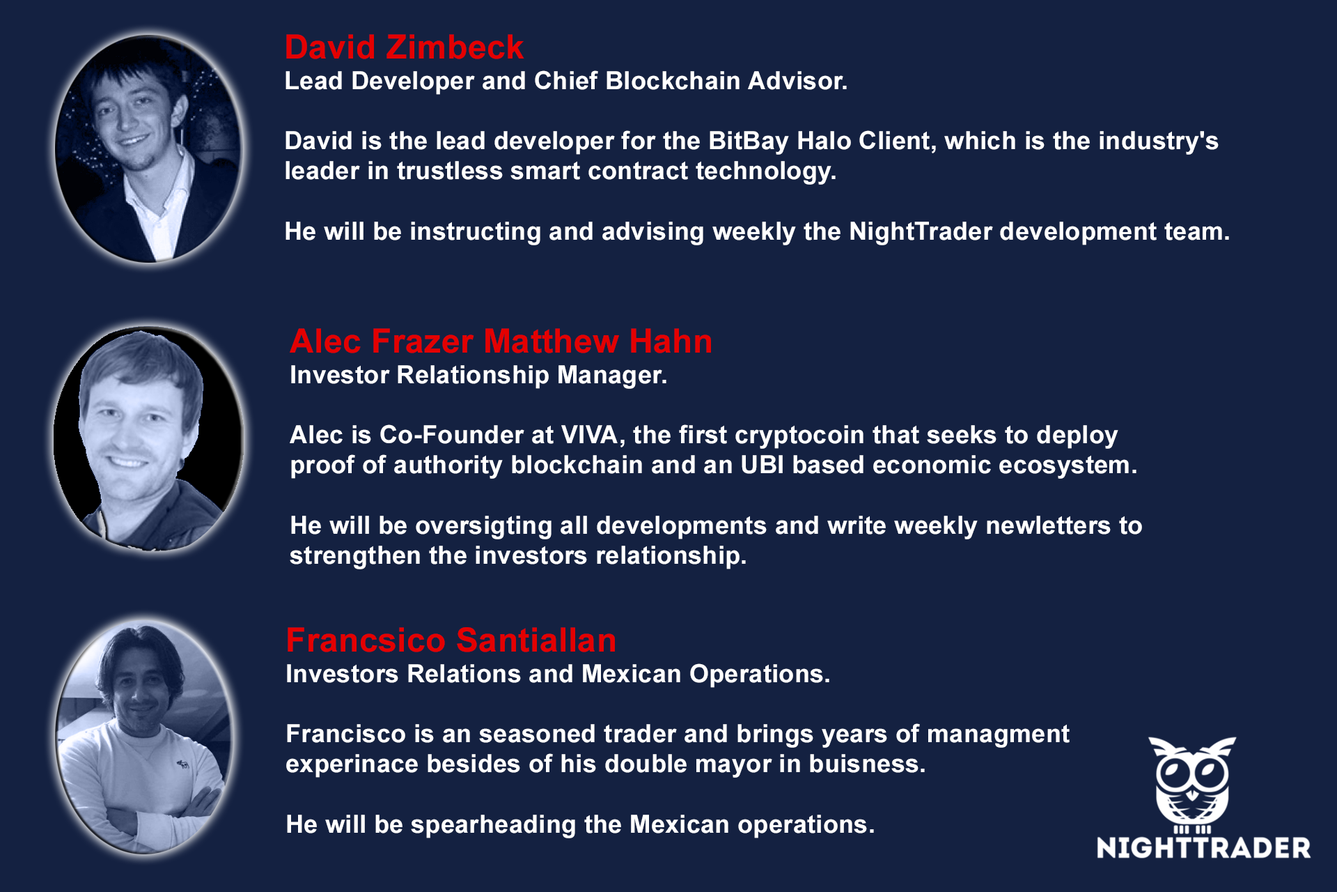
<style>
.page{position:relative;width:1337px;height:892px;background:#142141}
.page>*{position:absolute;margin:0}
.t1{font:25.1px "Arial-BoldMT";letter-spacing:0.01em;color:#ffffff}
.t2{font:33.4px "Arial-BoldMT";letter-spacing:0.01em;color:#e40000}
</style>
<div class="page">
<p class="t1" style="left:286px;top:34px;width:943px;height:211px"><span class="t2">David Zimbeck<br></span>Lead Developer and Chief Blockchain Advisor.<br><br>David is the lead developer for the BitBay Halo Client, which is the industry's<br>leader in trustless smart contract technology.<br><br>He will be instructing and advising weekly the NightTrader development team.</p>
<p class="t1" style="left:290px;top:328px;width:852px;height:241px"><span class="t2">Alec Frazer Matthew Hahn<br></span>Investor Relationship Manager.<br><br>Alec is Co-Founder at VIVA, the first cryptocoin that seeks to deploy<br>proof of authority blockchain and an UBI based economic ecosystem.<br><br>He will be oversigting all developments and write weekly newletters to<br>strengthen the investors relationship.</p>
<p class="t1" style="left:286px;top:627px;width:784px;height:211px"><span class="t2">Francsico Santiallan<br></span>Investors Relations and Mexican Operations.<br><br>Francisco is an seasoned trader and brings years of managment<br>experinace besides of his double mayor in buisness.<br><br>He will be spearheading the Mexican operations.</p>
</div>
